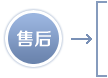
<style>
.page{position:relative;width:108px;height:78px;background:#ffffff}
.page>*{position:absolute;margin:0}
.t1{font:18px "FZZZHONGJW--GB1-0";color:#ffffff}
</style>
<div class="page">
<p class="t1" style="left:17px;top:30px;width:34px;height:17px">售后</p>
</div>
